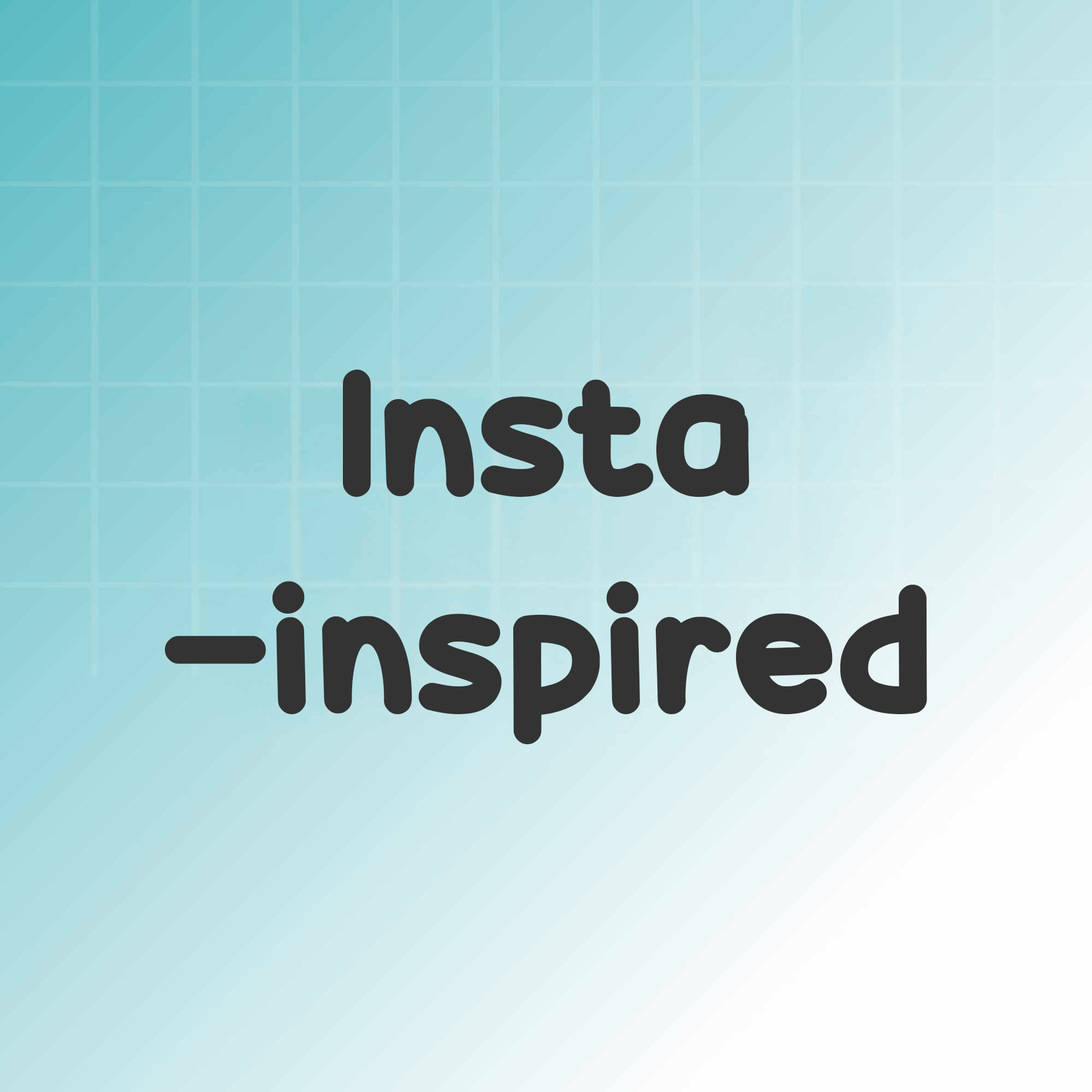
<style>
.page{position:relative;width:1092px;height:1092px}
.page>*{position:absolute;margin:0}
.t1{font:181.3px "CandyBeans";color:#333333}
</style>
<div class="page">
<p class="t1" style="left:165px;top:369px;width:762px;height:376px;text-align:center">Insta<br>-inspired</p>
</div>
